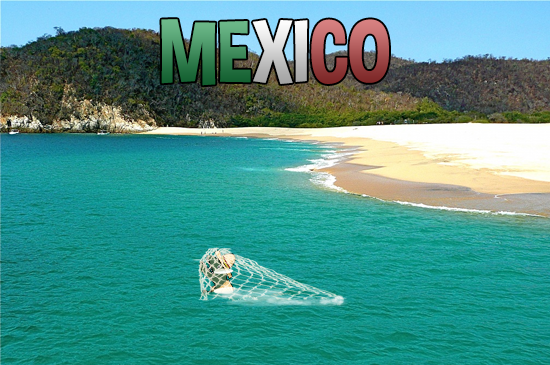
<style>
.page{position:relative;width:550px;height:365px}
.page>*{position:absolute;margin:0}
.t1{font:90px "DimboRegular"}
</style>
<div class="page">
<p class="t1" style="left:161px;top:19px;width:228px;height:67px">MEXICO</p>
</div>
